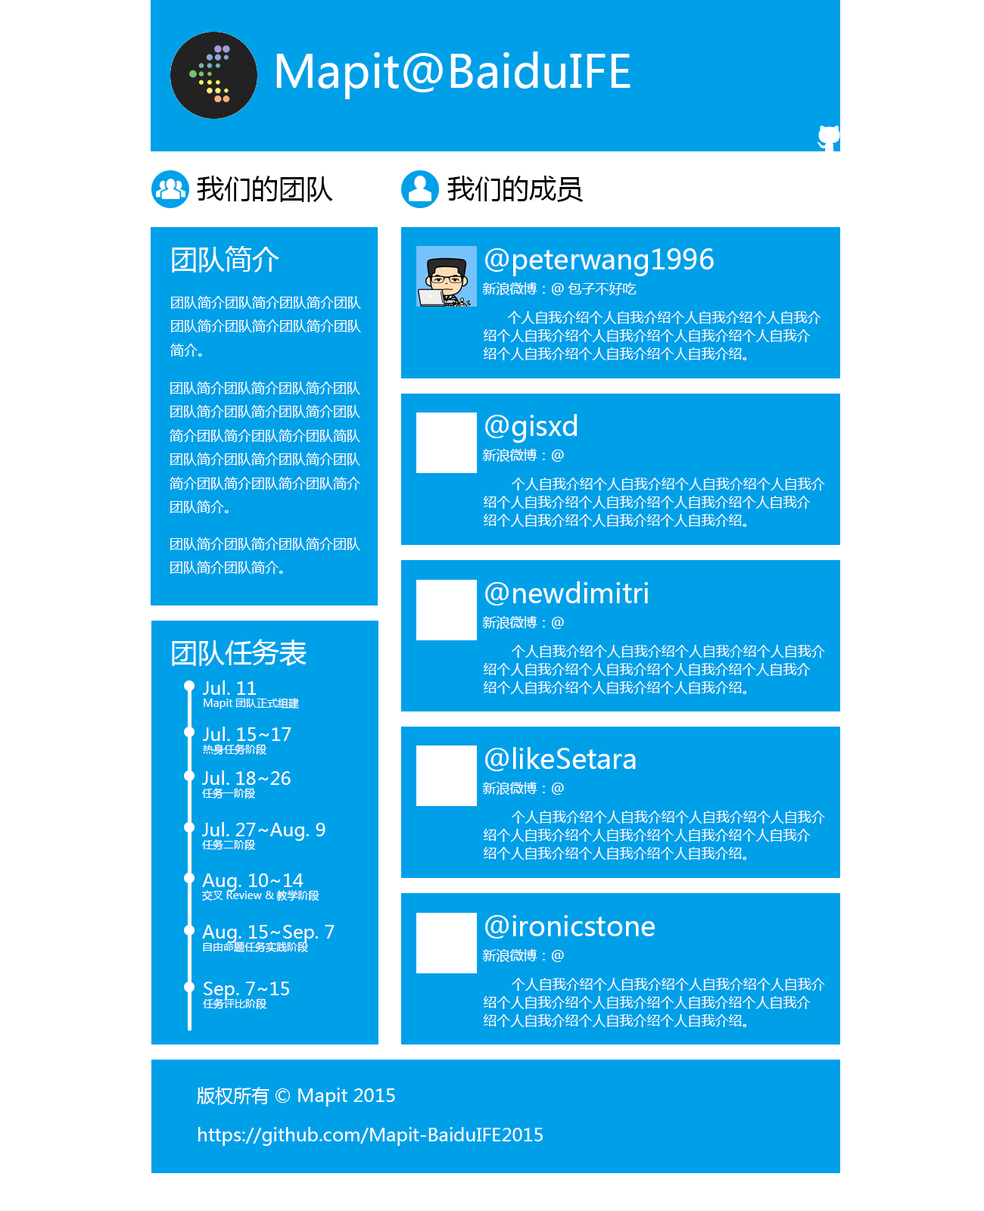
<style>
.page{position:relative;width:984px;height:1211px;background:#ffffff}
.page>*{position:absolute;margin:0}
.t1{font:45.4px "MicrosoftYaHei";color:#ffffff}
.t2{font:27.3px "MicrosoftYaHei";color:#000000}
.t3{font:27.3px "MicrosoftYaHei";color:#ffffff}
.t4{font:27.3px/36.3px "MicrosoftYaHei";color:#ffffff}
.t5{font:13.6px/36.3px "MicrosoftYaHei";color:#ffffff}
.t6{font:13.6px "MicrosoftYaHei";color:#ffffff}
.t7{font:13.6px/18.2px "MicrosoftYaHei";color:#ffffff}
.t8{font:10.6px/18.2px "MicrosoftYaHei";color:#ffffff}
.t9{font:18.2px/18.2px "MicrosoftYaHei";color:#ffffff}
.t10{font:18.2px "MicrosoftYaHei";color:#ffffff}
</style>
<div class="page">
<p class="t1" style="left:276px;top:51px;width:355px;height:48px">Mapit@BaiduIFE</p>
<p class="t2" style="left:197px;top:176px;width:136px;height:26px">我们的团队</p>
<p class="t2" style="left:447px;top:176px;width:137px;height:26px">我们的成员</p>
<p class="t3" style="left:172px;top:246px;width:107px;height:27px">团队简介</p>
<p class="t4" style="left:482px;top:248px;width:232px;height:47px">@peterwang1996<br><span class="t5">新浪微博：@包子不好吃</span></p>
<p class="t6" style="left:170px;top:296px;width:191px;height:61px">团队简介团队简介团队简介团队<br>团队简介团队简介团队简介团队<br>简介。</p>
<p class="t7" style="left:484px;top:311px;width:338px;height:49px">个人自我介绍个人自我介绍个人自我介绍个人自我介<br>绍个人自我介绍个人自我介绍个人自我介绍个人自我介<br>绍个人自我介绍个人自我介绍个人自我介绍。</p>
<p class="t6" style="left:170px;top:382px;width:190px;height:131px">团队简介团队简介团队简介团队<br>团队简介团队简介团队简介团队<br>简介团队简介团队简介团队简队<br>团队简介团队简介团队简介团队<br>简介团队简介团队简介团队简介<br>团队简介。</p>
<p class="t4" style="left:482px;top:414px;width:95px;height:48px">@gisxd<br><span class="t5">新浪微博：@</span></p>
<p class="t7" style="left:484px;top:478px;width:341px;height:49px">个人自我介绍个人自我介绍个人自我介绍个人自我介<br>绍个人自我介绍个人自我介绍个人自我介绍个人自我介<br>绍个人自我介绍个人自我介绍个人自我介绍。</p>
<p class="t6" style="left:170px;top:538px;width:190px;height:36px">团队简介团队简介团队简介团队<br>团队简介团队简介。</p>
<p class="t4" style="left:482px;top:581px;width:166px;height:48px">@newdimitri<br><span class="t5">新浪微博：@</span></p>
<p class="t3" style="left:172px;top:639px;width:135px;height:27px">团队任务表</p>
<p class="t7" style="left:484px;top:645px;width:341px;height:49px">个人自我介绍个人自我介绍个人自我介绍个人自我介<br>绍个人自我介绍个人自我介绍个人自我介绍个人自我介<br>绍个人自我介绍个人自我介绍个人自我介绍。</p>
<p class="t8" style="left:203px;top:681px;width:96px;height:28px"><span class="t9">Jul. 11<br></span>Mapit团队正式组建</p>
<p class="t9" style="left:203px;top:727px;width:89px;height:29px">Jul. 15~17<br><span class="t8">热身任务阶段</span></p>
<p class="t4" style="left:482px;top:747px;width:154px;height:48px">@likeSetara<br><span class="t5">新浪微博：@</span></p>
<p class="t9" style="left:202px;top:771px;width:89px;height:29px">Jul. 18~26<br><span class="t8">任务一阶段</span></p>
<p class="t7" style="left:484px;top:811px;width:341px;height:49px">个人自我介绍个人自我介绍个人自我介绍个人自我介<br>绍个人自我介绍个人自我介绍个人自我介绍个人自我介<br>绍个人自我介绍个人自我介绍个人自我介绍。</p>
<p class="t9" style="left:202px;top:822px;width:124px;height:29px">Jul. 27~Aug. 9<br><span class="t8">任务二阶段</span></p>
<p class="t8" style="left:202px;top:874px;width:118px;height:28px"><span class="t9">Aug. 10~14<br></span>交叉Review &amp;教学阶段</p>
<p class="t4" style="left:482px;top:915px;width:173px;height:47px">@ironicstone<br><span class="t5">新浪微博：@</span></p>
<p class="t9" style="left:202px;top:925px;width:133px;height:28px">Aug. 15~Sep. 7<br><span class="t8">自由命题任务实践阶段</span></p>
<p class="t9" style="left:203px;top:982px;width:86px;height:28px">Sep. 7~15<br><span class="t8">任务评比阶段</span></p>
<p class="t7" style="left:484px;top:978px;width:341px;height:49px">个人自我介绍个人自我介绍个人自我介绍个人自我介<br>绍个人自我介绍个人自我介绍个人自我介绍个人自我介<br>绍个人自我介绍个人自我介绍个人自我介绍。</p>
<p class="t10" style="left:197px;top:1087px;width:346px;height:59px">版权所有© Mapit 2015<br>https://github.com/Mapit-BaiduIFE2015</p>
</div>
